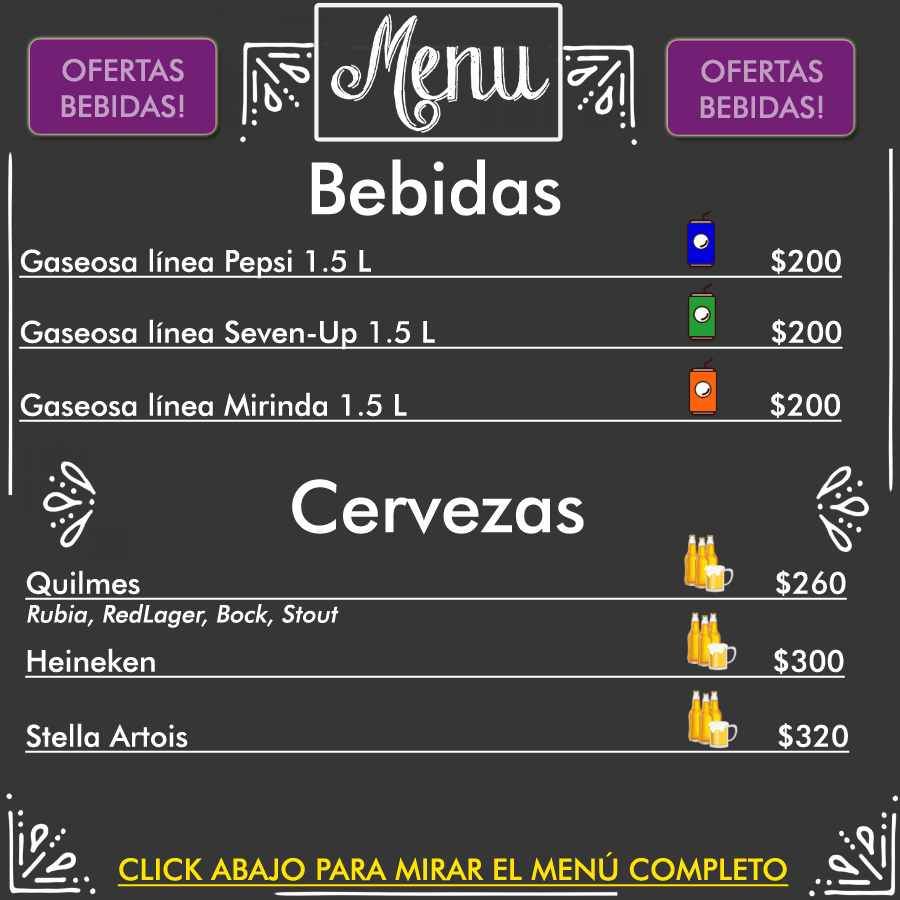
<style>
.page{position:relative;width:900px;height:900px;background:#363636}
.page>*{position:absolute;margin:0}
.t1{font:30px "FuturaBT-Medium";color:#c29dc3;text-transform:uppercase}
.t2{font:30px "FuturaBT-Medium";color:#c09ac1;text-transform:uppercase}
.t3{font:72px "FuturaBT-Medium";color:#ffffff}
.t4{font:30px "FuturaBT-Medium";color:#ffffff;text-decoration:underline}
.t5{font:24px "FuturaBT-Medium";color:#ffffff;font-style:italic}
.t6{font:30px "FuturaBT-Medium";color:#ffe400;text-transform:uppercase;text-decoration:underline}
</style>
<div class="page">
<p class="t1" style="left:61px;top:58px;width:123px;height:60px;text-align:center">ofertas<br>bebidas!</p>
<p class="t2" style="left:700px;top:59px;width:123px;height:60px;text-align:center">Ofertas<br>bebidas!</p>
<p class="t3" style="left:311px;top:159px;width:250px;height:57px">Bebidas</p>
<p class="t4" style="left:19px;top:248px;width:823px;height:31px">Gaseosa línea Pepsi 1.5 L                                            $200</p>
<p class="t4" style="left:19px;top:319px;width:824px;height:31px">Gaseosa línea Seven-Up 1.5 L                                     $200</p>
<p class="t4" style="left:19px;top:392px;width:823px;height:30px">Gaseosa línea Mirinda 1.5 L                                        $200</p>
<p class="t3" style="left:292px;top:479px;width:292px;height:56px">Cervezas</p>
<p class="t4" style="left:25px;top:570px;width:822px;height:58px">Quilmes                                                                      $260<br><span class="t5">Rubia, RedLager, Bock, Stout</span></p>
<p class="t4" style="left:25px;top:648px;width:820px;height:30px">Heineken                                                                    $300</p>
<p class="t4" style="left:25px;top:723px;width:825px;height:30px">Stella Artois                                                                 $320</p>
<p class="t6" style="left:117px;top:852px;width:672px;height:35px">click abajo para mirar el menú completo</p>
</div>
